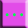
<style>
.page{position:relative;width:28px;height:28px;background:#e24ce8}
.page>*{position:absolute;margin:0}
.t1{font:14.2px "PumpDemiBoldLetPlain";color:#00ff48}
</style>
<div class="page">
<p class="t1" style="left:5px;top:13px;width:18px;height:4px">. . .</p>
</div>
